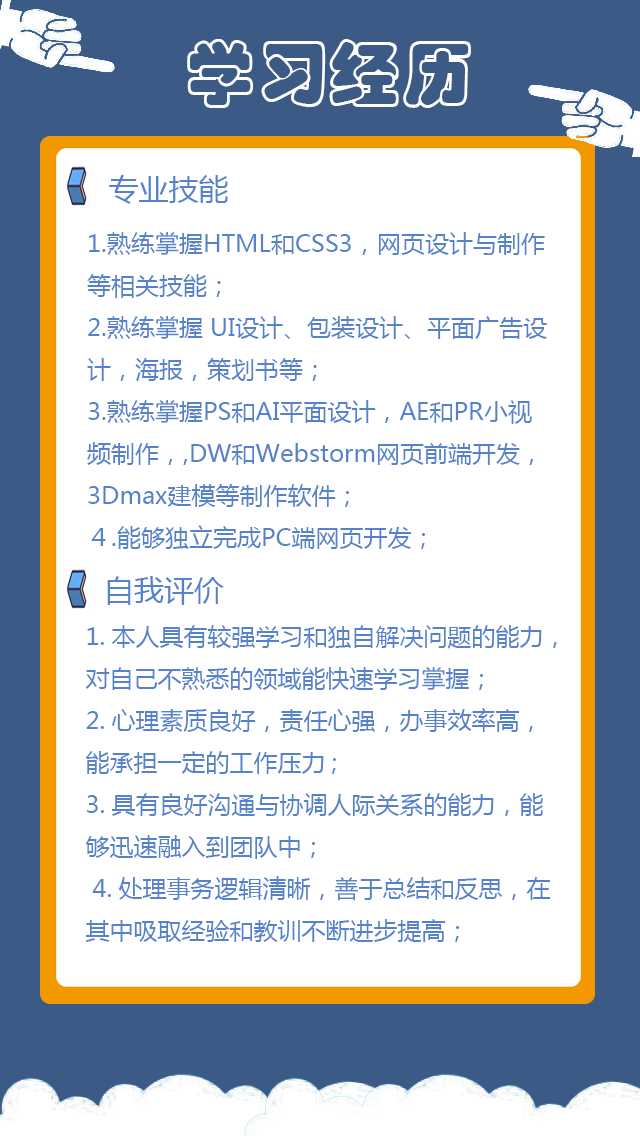
<style>
.page{position:relative;width:640px;height:1136px;background:#ffffff}
.page>*{position:absolute;margin:0}
.t1{font:72px "STCaiyun";color:#fefefe}
.t2{font:24px "MicrosoftYaHei";color:#5682cb}
.t3{font:36px "MicrosoftYaHei";color:#5682cb}
.t4{font:30px "MicrosoftYaHei";color:#5682cb}
</style>
<div class="page">
<p class="t1" style="left:187px;top:39px;width:284px;height:69px">学习经历</p>
<p class="t2" style="left:87px;top:175px;width:460px;height:374px"><span class="t3">  </span><span class="t4">专业技能<br></span>1.熟练掌握HTML和CSS3，网页设计与制作等相关技能；<br>2.熟练掌握 UI设计、包装设计、平面广告设计，海报，策划书等；<br>3.熟练掌握PS和AI平面设计，AE和PR小视频制作，,DW和Webstorm网页前端开发，3Dmax建模等制作软件；<br>４.能够独立完成PC端网页开发；</p>
<p class="t4" style="left:107px;top:576px;width:117px;height:29px"><span class="t2"><br></span>自我评价</p>
<p class="t2" style="left:85px;top:625px;width:472px;height:317px">1.本人具有较强学习和独自解决问题的能力，对自己不熟悉的领域能快速学习掌握；<br>2.心理素质良好，责任心强，办事效率高，能承担一定的工作压力;<br>3.具有良好沟通与协调人际关系的能力，能够迅速融入到团队中；<br> 4.处理事务逻辑清晰，善于总结和反思，在其中吸取经验和教训不断进步提高；</p>
</div>
